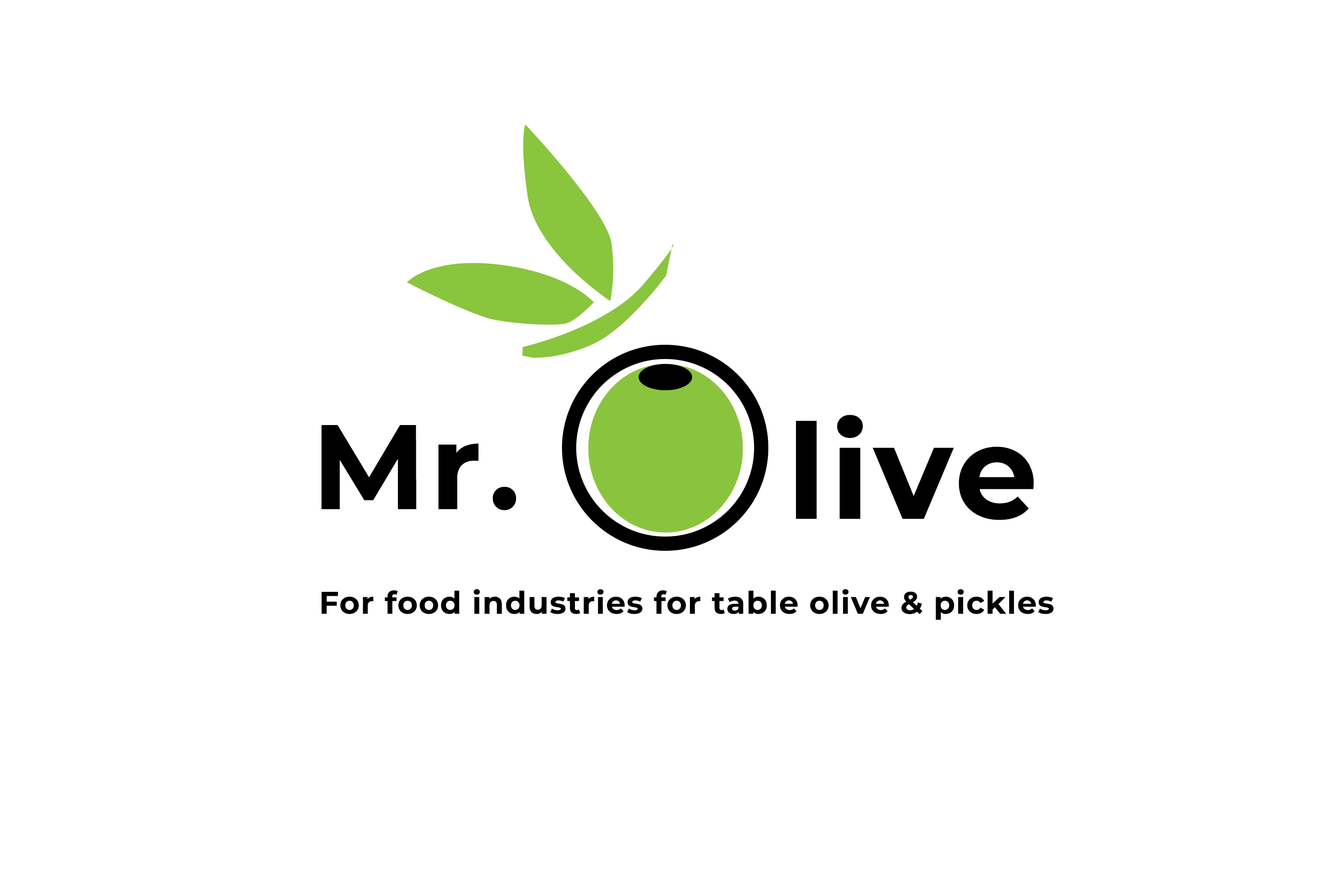
<style>
.page{position:relative;width:1337px;height:892px;background:#ffffff}
.page>*{position:absolute;margin:0}
.t1{font:120px "Montserrat-Bold";letter-spacing:0.03em;color:#000000}
.t2{font:131.9px "Montserrat-Bold";letter-spacing:0.03em;color:#000000}
.t3{font:31.1px "Montserrat-Bold";letter-spacing:0.03em;color:#000000}
</style>
<div class="page">
<p class="t1" style="left:321px;top:425px;width:195px;height:85px">.Mr</p>
<p class="t2" style="left:796px;top:415px;width:238px;height:105px">live</p>
<p class="t3" style="left:321px;top:589px;width:733px;height:31px">For food industries for table olive &amp; pickles</p>
</div>
